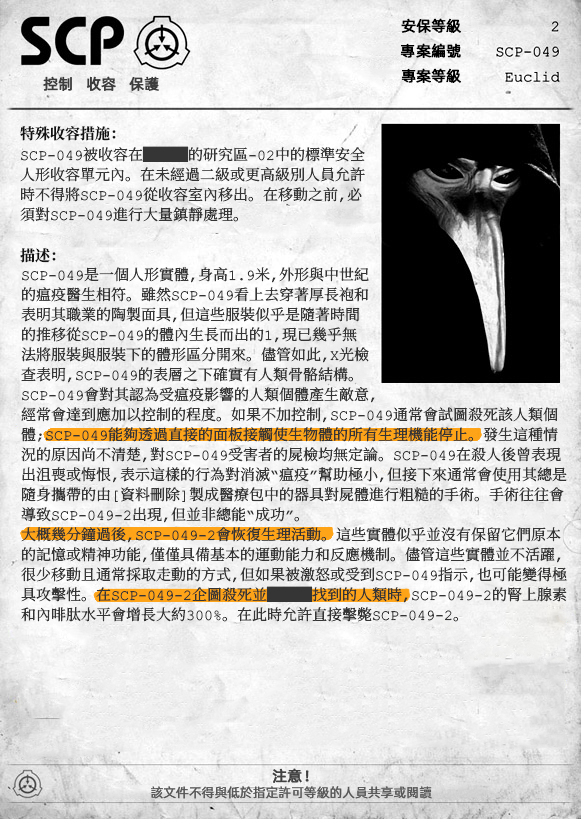
<style>
.page{position:relative;width:581px;height:819px}
.page>*{position:absolute;margin:0}
.t1{font:15px "AlibabaPuHuiTiR";color:#000000;font-weight:bold}
.t2{font:15px "AlibabaPuHuiTiR";color:#3d3d3d;font-weight:bold}
.t3{font:15px "ContainmentBreach-Bold";color:#121212}
.t4{font:15px/20px "ContainmentBreach-Regular";color:#353535}
.t5{font:15px "AlibabaPuHuiTiR";color:#414141;font-weight:bold}
.t6{font:13px "AlibabaPuHuiTiR";color:#575757}
</style>
<div class="page">
<p class="t1" style="left:401px;top:18px;width:60px;height:15px">安保等級</p>
<p class="t1" style="left:400px;top:43px;width:61px;height:15px">專案編號</p>
<p class="t2" style="left:43px;top:76px;width:116px;height:15px">控制   收容   保護</p>
<p class="t1" style="left:401px;top:68px;width:60px;height:15px">專案等級</p>
<p class="t3" style="left:20px;top:126px;width:96px;height:15px">特殊收容措施：</p>
<p class="t4" style="left:20px;top:146px;width:345px;height:76px">SCP-049被收容在███的研究區-02中的標準安全<br>人形收容單元內。在未經過二級或更高級別人員允許<br>時不得將SCP-049從收容室內移出。在移動之前，必<br>須對SCP-049進行大量鎮靜處理。</p>
<p class="t3" style="left:20px;top:248px;width:36px;height:15px">描述：</p>
<p class="t4" style="left:21px;top:267px;width:546px;height:355px">SCP-049是一個人形實體，身高1.9米，外形與中世紀<br>的瘟疫醫生相符。雖然SCP-049看上去穿著厚長袍和<br>表明其職業的陶製面具，但這些服裝似乎是隨著時間<br>的推移從SCP-049的體內生長而出的1，現已幾乎無<br>法將服裝與服裝下的體形區分開來。儘管如此，X光檢<br>查表明，SCP-049的表層之下確實有人類骨骼結構。<br>SCP-049會對其認為受瘟疫影響的人類個體產生敵意，<br>經常會達到應加以控制的程度。如果不加控制，SCP-049通常會試圖殺死該人類個<br>體；SCP-049能夠透過直接的面板接觸使生物體的所有生理機能停止。發生這種情<br>況的原因尚不清楚，對SCP-049受害者的屍檢均無定論。SCP-049在殺人後曾表現<br>出沮喪或悔恨，表示這樣的行為對消滅“瘟疫”幫助極小，但接下來通常會使用其總是<br>隨身攜帶的由[資料刪除]製成醫療包中的器具對屍體進行粗糙的手術。手術往往會<br>導致SCP-049-2出現，但並非總能“成功”。<br>大概幾分鐘過後，SCP-049-2會恢復生理活動。這些實體似乎並沒有保留它們原本<br>的記憶或精神功能，僅僅具備基本的運動能力和反應機制。儘管這些實體並不活躍，<br>很少移動且通常採取走動的方式，但如果被激怒或受到SCP-049指示，也可能變得極<br>具攻擊性。在SCP-049-2企圖殺死並███找到的人類時，SCP-049-2的腎上腺素<br>和內啡肽水平會增長大約300%。在此時允許直接擊斃SCP-049-2。</p>
<p class="t5" style="left:272px;top:768px;width:37px;height:15px">注意！</p>
<p class="t6" style="left:151px;top:786px;width:281px;height:13px">該文件不得與低於指定許可等級的人員共享或閱讀</p>
</div>
